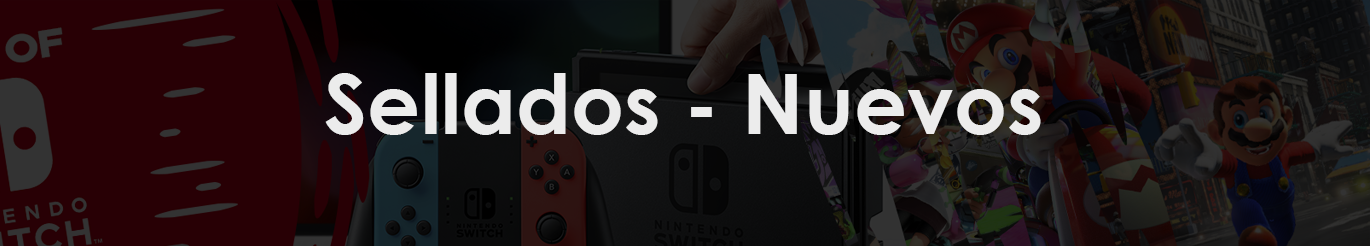
<style>
.page{position:relative;width:1370px;height:246px}
.page>*{position:absolute;margin:0}
.t1{font:83.3px "CenturyGothic-Bold";color:#ececec}
</style>
<div class="page">
<p class="t1" style="left:325px;top:73px;width:716px;height:62px">Sellados - Nuevos</p>
</div>
